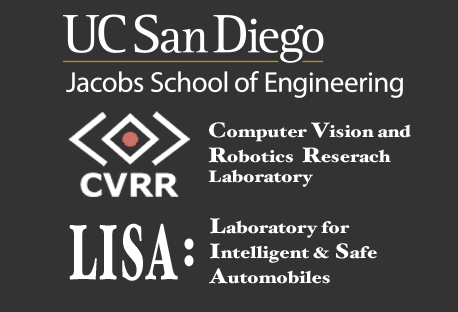
<style>
.page{position:relative;width:458px;height:312px;background:#333333}
.page>*{position:absolute;margin:0}
.t1{font:16.7px "HoeflerText-Black";color:#ffffff;scale:1.13 1}
.t2{font:20.8px "HoeflerText-Black";color:#ffffff;scale:1.13 1}
.t3{font:20.9px "HoeflerText-Black";color:#ffffff;scale:1.13 1}
.t4{font:78.2px "HoeflerText-Black";color:#ffffff;scale:0.53 1}
.t5{font:14.5px "HoeflerText-Black";color:#ffffff;scale:0.83 1}
</style>
<div class="page">
<p class="t1" style="left:208px;top:122px;width:203px;height:65px"><span class="t2">C</span>omputer <span class="t2">V</span>ision and <span class="t2">R</span>obotics  <span class="t2">R</span>eserach Laboratory</p>
<p class="t1" style="left:209px;top:218px;width:168px;height:66px"><span class="t3">L</span>aboratory for <br><span class="t2">I</span>ntelligent &amp; <span class="t2">S</span>afe <span class="t2">A</span>utomobiles</p>
<p class="t4" style="left:69px;top:223px;width:109px;height:58px">LISA</p>
<p class="t5" style="left:184px;top:238px;width:10px;height:29px">:</p>
</div>
